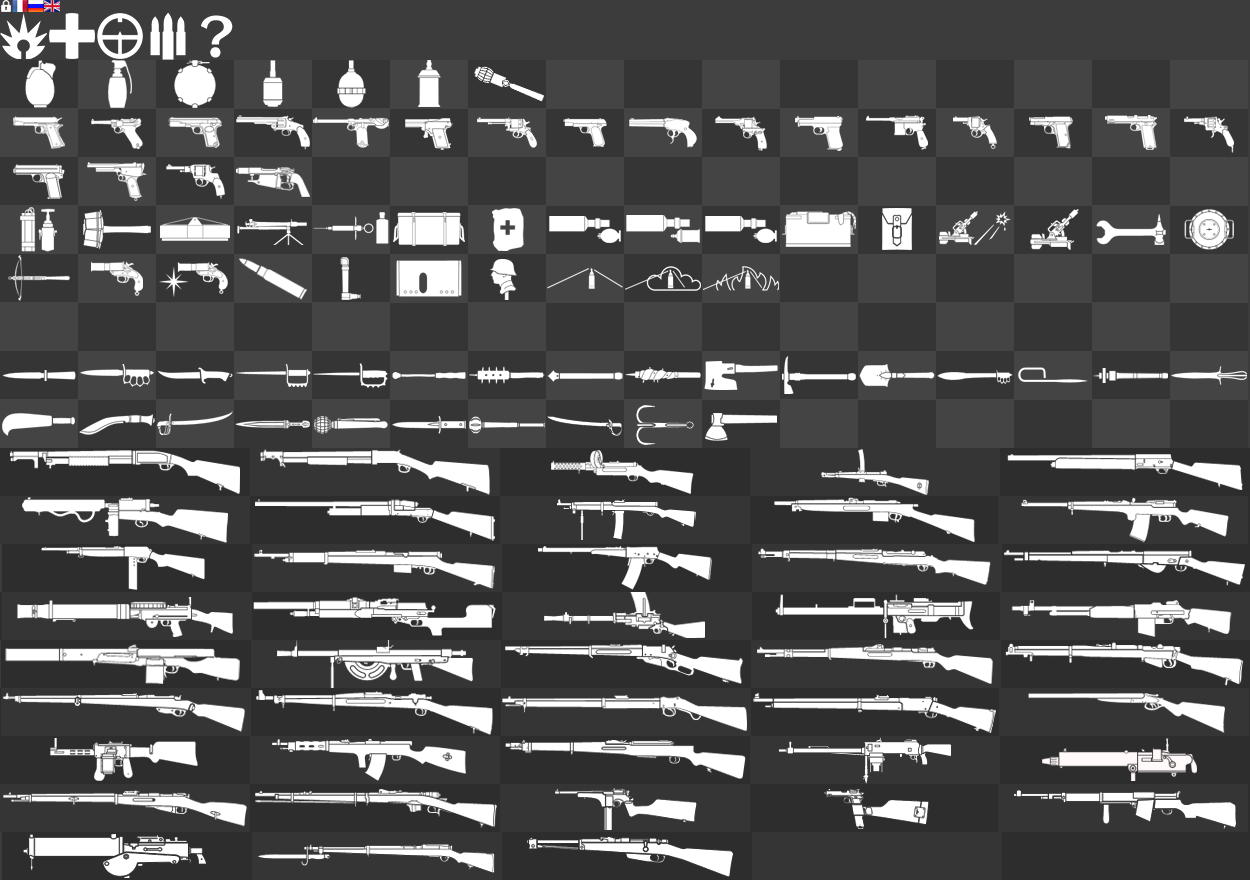
<style>
.page{position:relative;width:1250px;height:880px;background:#353535}
.page>*{position:absolute;margin:0}
.t1{font:80px "LilyUPC";letter-spacing:0.05em;color:#ffffff}
</style>
<div class="page">
<p class="t1" style="left:201px;top:15px;width:32px;height:43px">?</p>
</div>
